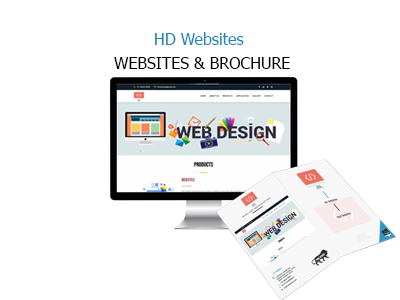
<style>
.page{position:relative;width:400px;height:300px;background:#ffffff}
.page>*{position:absolute;margin:0}
.t1{font:16px "Tahoma";color:#1b87bd}
.t2{font:16px "Tahoma";color:#000000}
</style>
<div class="page">
<p class="t1" style="left:155px;top:32px;width:89px;height:13px">HD Websites</p>
<p class="t2" style="left:114px;top:57px;width:176px;height:12px">WEBSITES &amp; BROCHURE</p>
</div>
